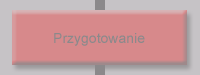
<style>
.page{position:relative;width:200px;height:75px;background:#d7898b}
.page>*{position:absolute;margin:0}
.t1{font:14px "ArialMT";color:#8b898b}
</style>
<div class="page">
<p class="t1" style="left:54px;top:33px;width:91px;height:13px">Przygotowanie</p>
</div>
